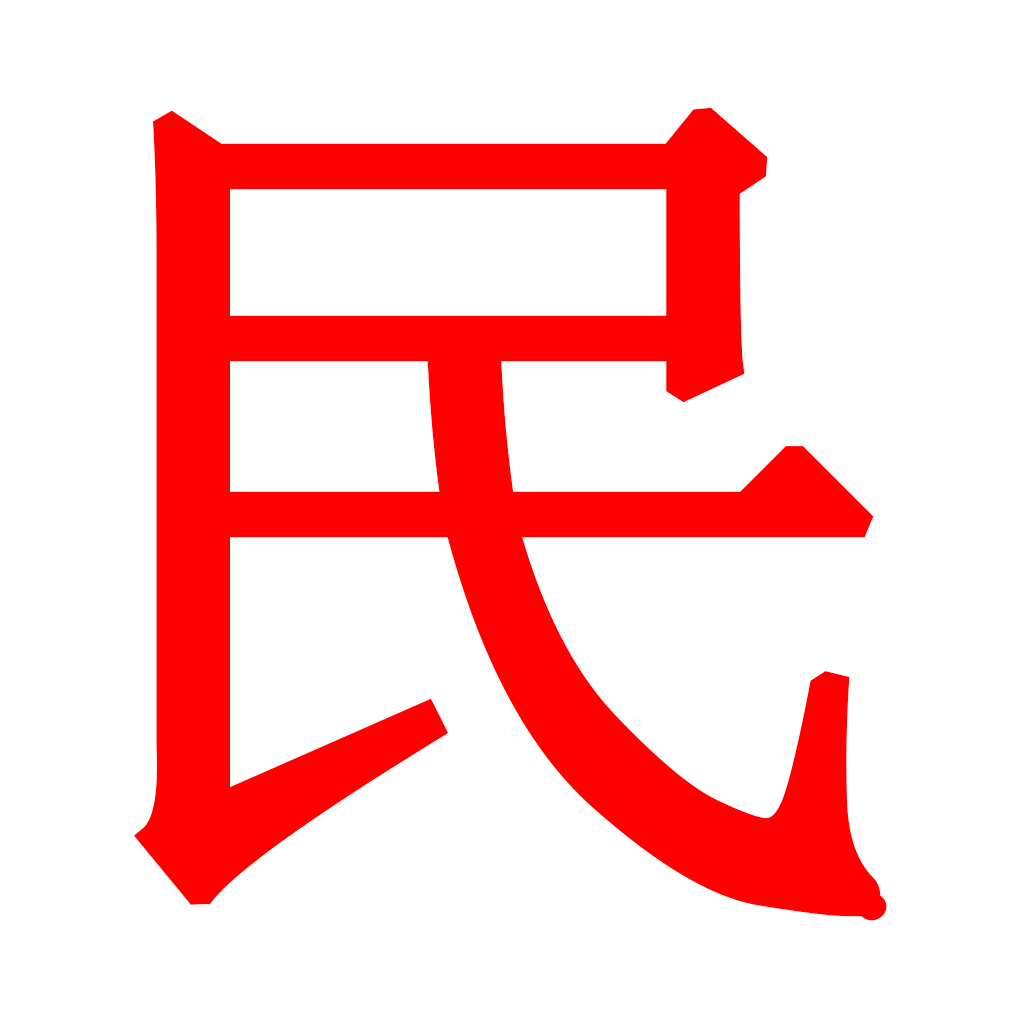
<style>
.page{position:relative;width:1024px;height:1024px;background:#ffffff}
.page>*{position:absolute;margin:0}
.t1{font:900px "SimSun";color:#ff0000;font-weight:bold}
</style>
<div class="page">
<p class="t1" style="left:133px;top:107px;width:754px;height:814px">民</p>
</div>
